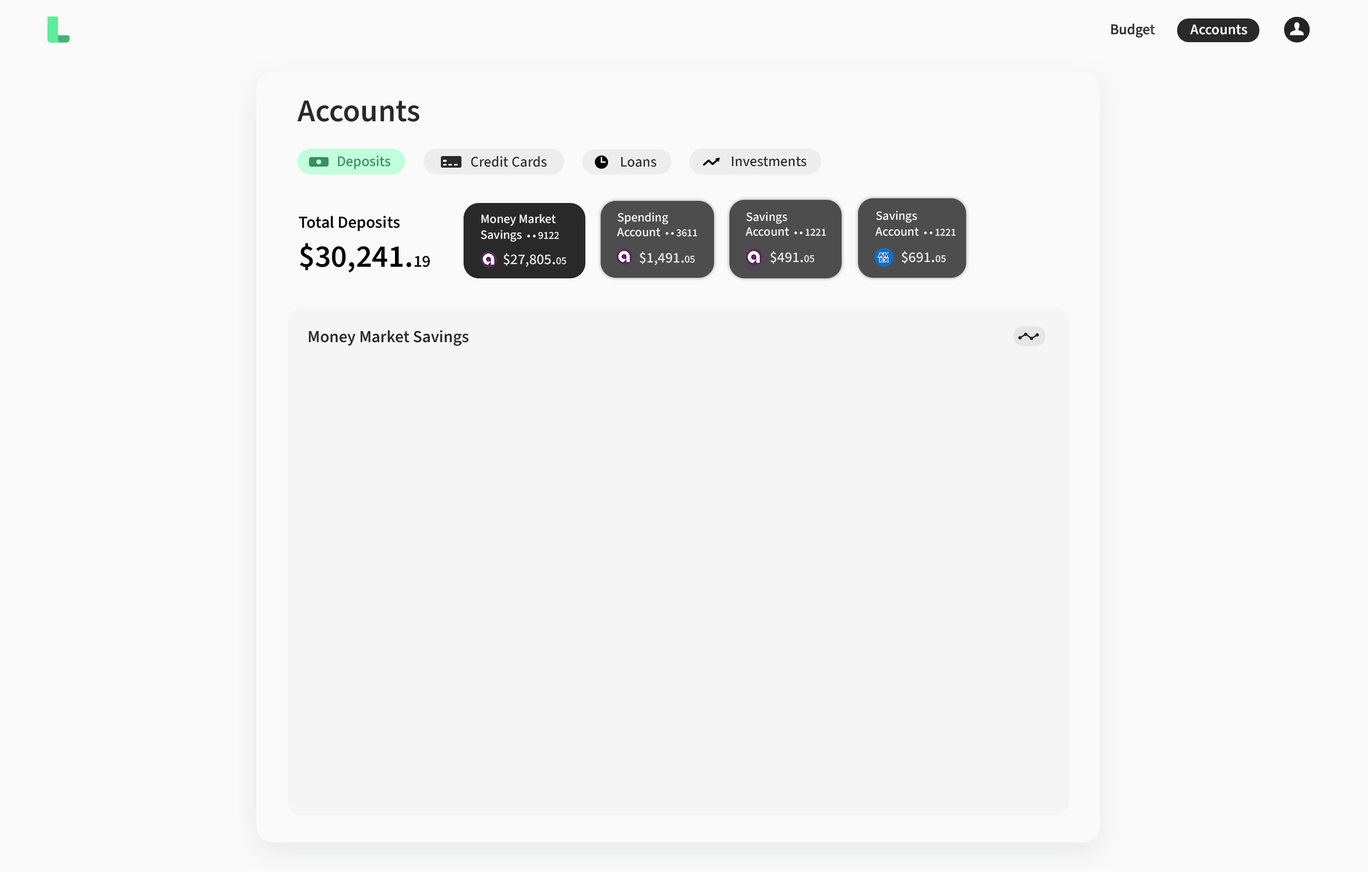
<style>
.page{position:relative;width:1368px;height:872px;background:#fafafa}
.page>*{position:absolute;margin:0}
.t1{font:14.7px "SourceSans3-SemiBold";color:#ffffff}
.t2{font:31.6px "SourceSans3-SemiBold";color:#292929}
.t3{font:14.8px "SourceSans3-Medium";color:#33905d}
.t4{font:14.8px "SourceSans3-Medium";color:#292929}
.t5{font:16.9px/39px "SourceSans3-SemiBold";color:#000000}
.t6{font:31.6px/39px "SourceSans3-SemiBold";color:#000000}
.t7{font:12.7px/15.8px "SourceSans3-Medium";color:#fafafa}
.t8{font:10.5px/15.8px "SourceSans3-Medium";color:#fafafa}
.t9{font:12.7px/14.8px "SourceSans3-Medium";color:#fafafa}
.t10{font:10.5px/14.8px "SourceSans3-Medium";color:#fafafa}
.t11{font:14.8px "SourceSans3-Medium";color:#fafafa}
.t12{font:16.9px "SourceSans3-Medium";color:#fafafa}
.t13{font:10.5px "SourceSans3-Medium";color:#fafafa}
.t14{font:10.5px "SourceSans3-SemiBold";color:#fafafa}
.t15{font:16.9px "SourceSans3-SemiBold";color:#292929}
</style>
<div class="page">
<p class="t1" style="left:1190px;top:24px;width:57px;height:11px">Accounts</p>
<p class="t2" style="left:297px;top:100px;width:122px;height:22px">Accounts</p>
<p class="t3" style="left:338px;top:156px;width:52px;height:13px">Deposits</p>
<p class="t4" style="left:471px;top:156px;width:76px;height:11px">Credit Cards</p>
<p class="t4" style="left:621px;top:157px;width:35px;height:10px">Loans</p>
<p class="t4" style="left:732px;top:156px;width:74px;height:11px">Investments</p>
<p class="t5" style="left:298px;top:216px;width:132px;height:57px">Total Deposits<br><span class="t6">$30,241.</span>19</p>
<p class="t7" style="left:481px;top:214px;width:78px;height:28px">Money Market<br>Savings  <span class="t8">• • 9122</span></p>
<p class="t9" style="left:617px;top:212px;width:80px;height:25px">Spending <br>Account  <span class="t10">• • 3611</span></p>
<p class="t9" style="left:745px;top:212px;width:81px;height:24px">Savings<br>Account  <span class="t10">• • 1221</span></p>
<p class="t7" style="left:875px;top:211px;width:80px;height:25px">Savings <br>Account  <span class="t8">• • 1221</span></p>
<p class="t11" style="left:503px;top:253px;width:63px;height:14px;opacity:0.88">$27,805<span class="t12">.</span><span class="t13">05</span></p>
<p class="t11" style="left:639px;top:251px;width:56px;height:14px;opacity:0.88">$1,491<span class="t12">.</span><span class="t13">05</span></p>
<p class="t11" style="left:770px;top:251px;width:44px;height:13px;opacity:0.88">$491<span class="t12">.</span><span class="t13">05</span></p>
<p class="t11" style="left:901px;top:251px;width:44px;height:13px;opacity:0.88">$691<span class="t12">.</span><span class="t14">05</span></p>
<p class="t15" style="left:308px;top:330px;width:161px;height:16px">Money Market Savings</p>
</div>
